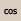
<style>
.page{position:relative;width:21px;height:21px;background:#d9cdc1}
.page>*{position:absolute;margin:0}
.t1{font:9px "Tahoma";color:#000000}
</style>
<div class="page">
<p class="t1" style="left:4px;top:8px;width:13px;height:7px">cos</p>
</div>
